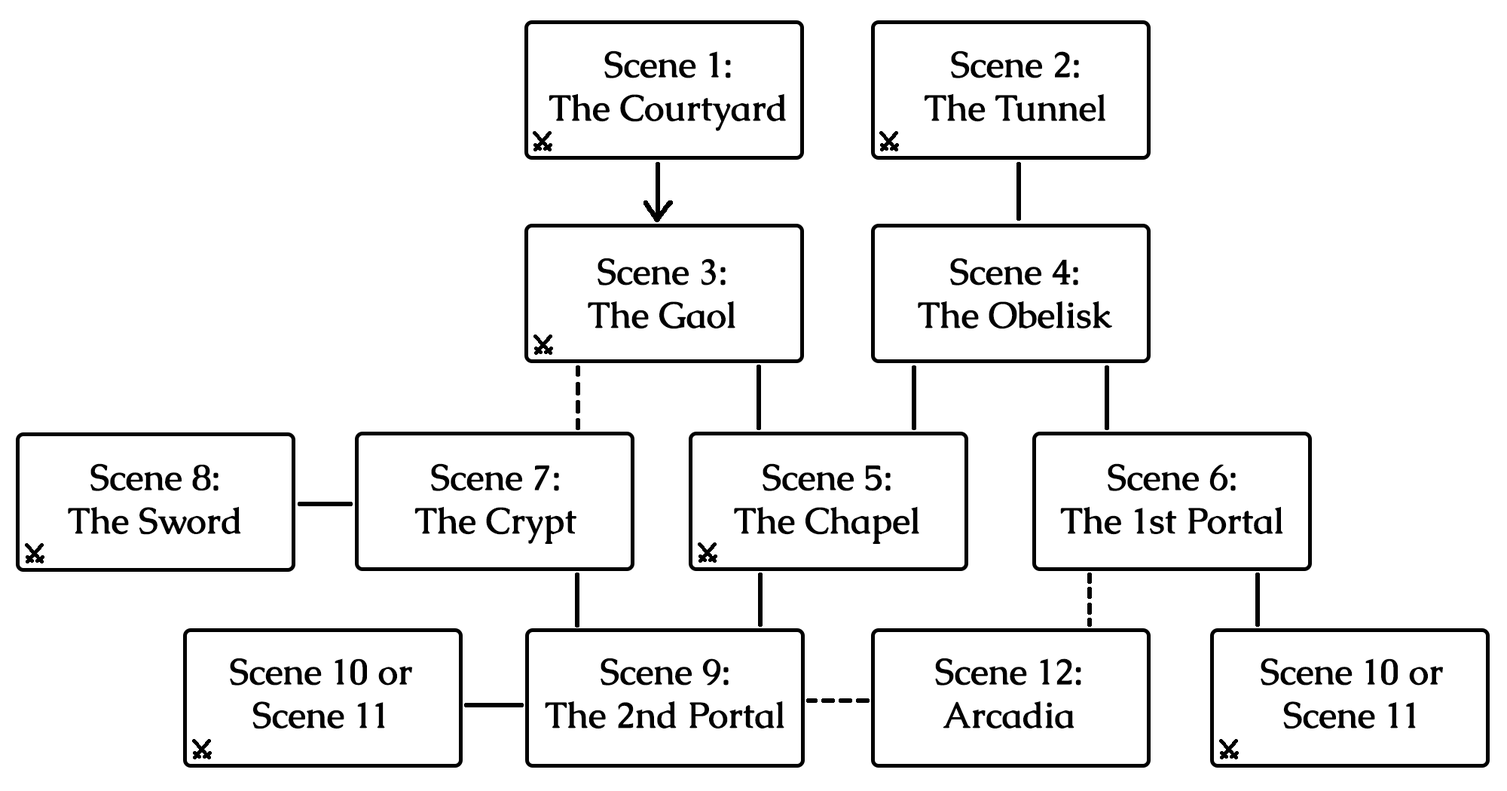
<style>
.page{position:relative;width:1507px;height:791px;background:#ffffff}
.page>*{position:absolute;margin:0}
.t1{font:36.2px "Caudex-Bold";color:#000000}
</style>
<div class="page">
<p class="t1" style="left:549px;top:50px;width:237px;height:81px;text-align:center">Scene 1:<br>The Courtyard</p>
<p class="t1" style="left:925px;top:50px;width:181px;height:72px;text-align:center">Scene 2:<br>The Tunnel</p>
<p class="t1" style="left:588px;top:258px;width:147px;height:71px;text-align:center">Scene 3:<br>The Gaol</p>
<p class="t1" style="left:918px;top:258px;width:194px;height:71px;text-align:center">Scene 4:<br>The Obelisk</p>
<p class="t1" style="left:68px;top:463px;width:173px;height:72px;text-align:center">Scene 8:<br>The Sword</p>
<p class="t1" style="left:414px;top:463px;width:162px;height:81px;text-align:center">Scene 7:<br>The Crypt</p>
<p class="t1" style="left:734px;top:463px;width:185px;height:81px;text-align:center">Scene 5:<br>The Chapel</p>
<p class="t1" style="left:1060px;top:463px;width:223px;height:72px;text-align:center">Scene 6:<br>The 1st Portal</p>
<p class="t1" style="left:230px;top:658px;width:182px;height:71px;text-align:center">Scene 10 or<br>Scene 11</p>
<p class="t1" style="left:545px;top:658px;width:239px;height:71px;text-align:center">Scene 9:<br>The 2nd Portal</p>
<p class="t1" style="left:935px;top:658px;width:146px;height:71px;text-align:center">Scene 12:<br>Arcadia</p>
<p class="t1" style="left:1261px;top:658px;width:182px;height:71px;text-align:center">Scene 10 or<br>Scene 11</p>
</div>
